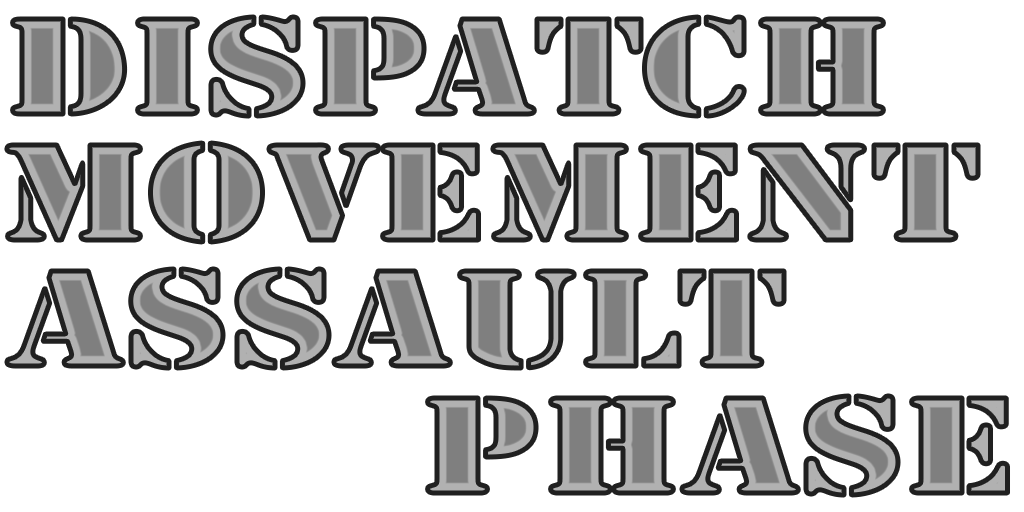
<style>
.page{position:relative;width:1024px;height:512px;background:#ffffff}
.page>*{position:absolute;margin:0}
.t1{font:126.4px "StencilStd";scale:1.32 1}
</style>
<div class="page">
<p class="t1" style="left:12px;top:17px;width:872px;height:99px">Dispatch</p>
<p class="t1" style="left:6px;top:143px;width:972px;height:99px">MovemenT</p>
<p class="t1" style="left:7px;top:269px;width:777px;height:99px">Assault</p>
<p class="t1" style="left:427px;top:396px;width:581px;height:99px">Phase</p>
</div>
